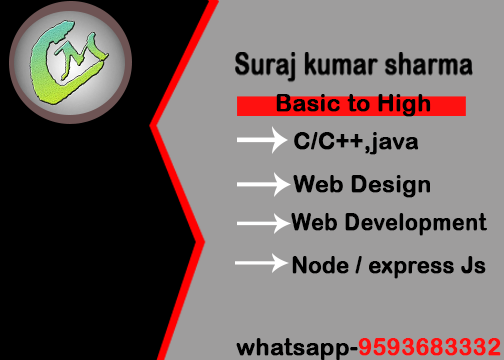
<style>
.page{position:relative;width:504px;height:360px;background:#9e9d9d}
.page>*{position:absolute;margin:0}
.t1{font:24px "ArialRoundedMTBold";color:#000000;font-weight:bold;scale:0.96 1}
.t2{font:23.9px "ArialRoundedMTBold";color:#000000;font-weight:bold;scale:0.89 1}
.t3{font:23.9px "ArialRoundedMTBold";color:#000000;font-weight:bold;scale:0.91 1}
.t4{font:23.9px "ArialRoundedMTBold";color:#ff1010;font-weight:bold;scale:0.96 1}
.t5{font:23.9px "ArialRoundedMTBold";color:#000000;font-weight:bold;scale:0.96 1}
</style>
<div class="page">
<p class="t1" style="left:276px;top:94px;width:155px;height:23px">Basic to High</p>
<p class="t1" style="left:294px;top:132px;width:125px;height:23px">C/C++,java</p>
<p class="t1" style="left:293px;top:175px;width:137px;height:23px">Web Design</p>
<p class="t2" style="left:291px;top:213px;width:196px;height:23px">Web Development</p>
<p class="t3" style="left:292px;top:256px;width:194px;height:23px">Node / express Js</p>
<p class="t4" style="left:236px;top:338px;width:265px;height:23px"><span class="t5">whatsapp-</span>9593683332</p>
</div>
